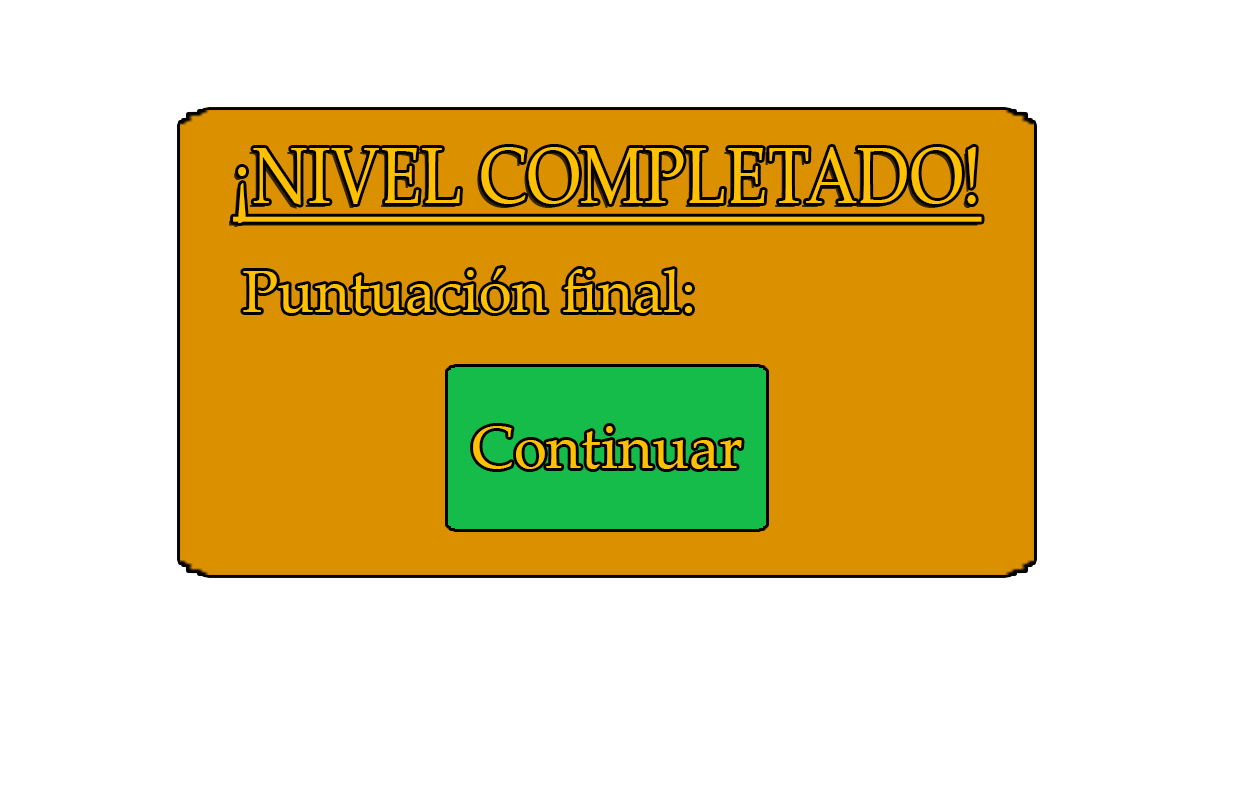
<style>
.page{position:relative;width:1248px;height:807px;background:#ffffff}
.page>*{position:absolute;margin:0}
.t1{font:80px "PalatinoLinotype-Roman";color:#ffc000;text-decoration:underline;scale:0.84 1}
.t2{font:60px "PalatinoLinotype-Roman";color:#ffc000}
</style>
<div class="page">
<p class="t1" style="left:233px;top:147px;width:749px;height:76px">¡NIVEL COMPLETADO!</p>
<p class="t2" style="left:243px;top:268px;width:449px;height:45px">Puntuación final:</p>
</div>
